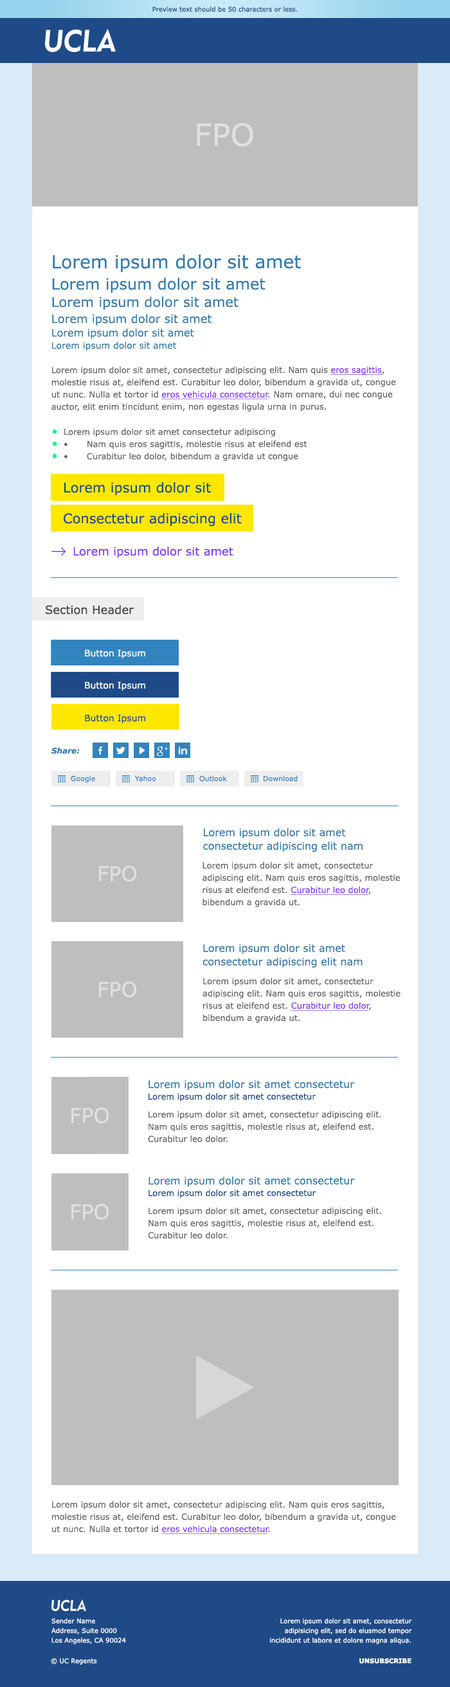
<style>
.page{position:relative;width:450px;height:1687px;background:#ffffff}
.page>*{position:absolute;margin:0}
.t1{font:6.4px "Verdana";color:#1e4b87}
.t2{font:30.9px "Verdana";color:#e0e0e0}
.t3{font:18px "Verdana";color:#347bad}
.t4{font:15.4px "Verdana";color:#347bad}
.t5{font:13.5px "Verdana";color:#347bad}
.t6{font:11.6px "Verdana";color:#347bad}
.t7{font:10.3px "Verdana";color:#347bad}
.t8{font:9px "Verdana";color:#347bad}
.t9{font:8.4px/12.2px "Verdana";color:#666666}
.t10{font:8.4px/12.2px "Verdana";color:#8237ff;text-decoration:underline}
.t11{font:12.2px/12.2px "Verdana";color:#00ff87}
.t12{font:13.5px "Verdana";color:#1e4b87}
.t13{font:11.6px "Verdana";color:#8237ff}
.t14{font:11.6px "Verdana";color:#444444}
.t15{font:9px "Verdana";color:#ffffff}
.t16{font:9px "Verdana";color:#1e4b87}
.t17{font:7.7px "Verdana-BoldItalic";color:#347bad}
.t18{font:7.1px "Verdana";color:#3284bf}
.t19{font:10.3px/13.5px "Verdana";color:#347bad}
.t20{font:20.6px "Verdana";color:#e0e0e0}
.t21{font:8.4px "Verdana";color:#1e4b87}
.t22{font:6.4px/9.6px "Verdana";color:#ffffff}
.t23{font:6.4px "Verdana";color:#ffffff}
.t24{font:6.4px "Verdana-Bold";color:#ffffff;text-transform:uppercase}
</style>
<div class="page">
<p class="t1" style="left:152px;top:6px;width:146px;height:6px">Preview text should be 50 characters or less.</p>
<p class="t2" style="left:197px;top:123px;width:56px;height:24px">FPO</p>
<p class="t3" style="left:53px;top:255px;width:248px;height:18px">Lorem ipsum dolor sit amet</p>
<p class="t4" style="left:52px;top:278px;width:214px;height:15px">Lorem ipsum dolor sit amet</p>
<p class="t5" style="left:52px;top:296px;width:187px;height:14px">Lorem ipsum dolor sit amet</p>
<p class="t6" style="left:52px;top:314px;width:160px;height:12px">Lorem ipsum dolor sit amet</p>
<p class="t7" style="left:52px;top:328px;width:142px;height:11px">Lorem ipsum dolor sit amet</p>
<p class="t8" style="left:52px;top:341px;width:124px;height:10px">Lorem ipsum dolor sit amet</p>
<p class="t9" style="left:51px;top:366px;width:345px;height:45px">Lorem ipsum dolor sit amet, consectetur adipiscing elit. Nam quis <span class="t10">eros sagittis</span>, molestie risus at, eleifend est. Curabitur leo dolor, bibendum a gravida ut, congue ut nunc. Nulla et tortor id <span class="t10">eros vehicula consectetur</span>. Nam ornare, dui nec congue auctor, elit enim tincidunt enim, non egestas ligula urna in purus.</p>
<p class="t11" style="left:52px;top:429px;width:5px;height:29px">•<br>•<br>•</p>
<p class="t9" style="left:64px;top:428px;width:243px;height:33px">Lorem ipsum dolor sit amet consectetur adipiscing<br>•  Nam quis eros sagittis, molestie risus at eleifend est<br>•  Curabitur leo dolor, bibendum a gravida ut congue</p>
<p class="t12" style="left:64px;top:482px;width:147px;height:14px">Lorem ipsum dolor sit</p>
<p class="t12" style="left:64px;top:513px;width:178px;height:13px">Consectetur adipiscing elit</p>
<p class="t13" style="left:73px;top:546px;width:160px;height:12px">Lorem ipsum dolor sit amet</p>
<p class="t14" style="left:46px;top:605px;width:88px;height:10px">Section Header</p>
<p class="t15" style="left:85px;top:649px;width:60px;height:9px">Button Ipsum</p>
<p class="t15" style="left:85px;top:681px;width:60px;height:9px">Button Ipsum</p>
<p class="t16" style="left:85px;top:714px;width:60px;height:9px">Button Ipsum</p>
<p class="t17" style="left:51px;top:747px;width:29px;height:7px">Share:</p>
<p class="t18" style="left:71px;top:775px;width:24px;height:8px">Google</p>
<p class="t18" style="left:135px;top:775px;width:21px;height:7px">Yahoo</p>
<p class="t18" style="left:199px;top:775px;width:28px;height:7px">Outlook</p>
<p class="t18" style="left:264px;top:775px;width:34px;height:7px">Download</p>
<p class="t19" style="left:203px;top:828px;width:160px;height:24px">Lorem ipsum dolor sit amet consectetur adipiscing elit nam</p>
<p class="t20" style="left:99px;top:865px;width:37px;height:17px">FPO</p>
<p class="t9" style="left:203px;top:862px;width:197px;height:45px">Lorem ipsum dolor sit amet, consectetur adipiscing elit. Nam quis eros sagittis, molestie risus at eleifend est. <span class="t10">Curabitur leo dolor</span>, bibendum a gravida ut.</p>
<p class="t19" style="left:203px;top:944px;width:160px;height:24px">Lorem ipsum dolor sit amet consectetur adipiscing elit nam</p>
<p class="t9" style="left:203px;top:978px;width:198px;height:45px">Lorem ipsum dolor sit amet, consectetur adipiscing elit. Nam quis eros sagittis, molestie risus at eleifend est. <span class="t10">Curabitur leo dolor</span>, bibendum a gravida ut.</p>
<p class="t20" style="left:99px;top:981px;width:37px;height:17px">FPO</p>
<p class="t7" style="left:148px;top:1080px;width:207px;height:10px">Lorem ipsum dolor sit amet consectetur</p>
<p class="t21" style="left:148px;top:1093px;width:168px;height:8px">Lorem ipsum dolor sit amet consectetur</p>
<p class="t20" style="left:71px;top:1107px;width:38px;height:17px">FPO</p>
<p class="t9" style="left:148px;top:1111px;width:233px;height:31px">Lorem ipsum dolor sit amet, consectetur adipiscing elit. Nam quis eros sagittis, molestie risus at, eleifend est. Curabitur leo dolor.</p>
<p class="t7" style="left:148px;top:1176px;width:207px;height:11px">Lorem ipsum dolor sit amet consectetur</p>
<p class="t21" style="left:148px;top:1189px;width:168px;height:9px">Lorem ipsum dolor sit amet consectetur</p>
<p class="t20" style="left:71px;top:1203px;width:38px;height:17px">FPO</p>
<p class="t9" style="left:148px;top:1207px;width:233px;height:32px">Lorem ipsum dolor sit amet, consectetur adipiscing elit. Nam quis eros sagittis, molestie risus at, eleifend est. Curabitur leo dolor.</p>
<p class="t9" style="left:52px;top:1501px;width:344px;height:33px">Lorem ipsum dolor sit amet, consectetur adipiscing elit. Nam quis eros sagittis, molestie risus at, eleifend est. Curabitur leo dolor, bibendum a gravida ut, congue ut nunc. Nulla et tortor id <span class="t10">eros vehicula consectetur</span>.</p>
<p class="t22" style="left:51px;top:1618px;width:75px;height:26px">Sender Name<br>Address, Suite 0000<br>Los Angeles, CA 90024</p>
<p class="t22" style="left:270px;top:1618px;width:142px;height:26px;text-align:right">Lorem ipsum dolor sit amet, consectetur adipisicing elit, sed do eiusmod tempor incididunt ut labore et dolore magna aliqua.</p>
<p class="t23" style="left:51px;top:1658px;width:46px;height:7px">© UC Regents</p>
<p class="t24" style="left:359px;top:1658px;width:52px;height:6px">Unsubscribe</p>
</div>
